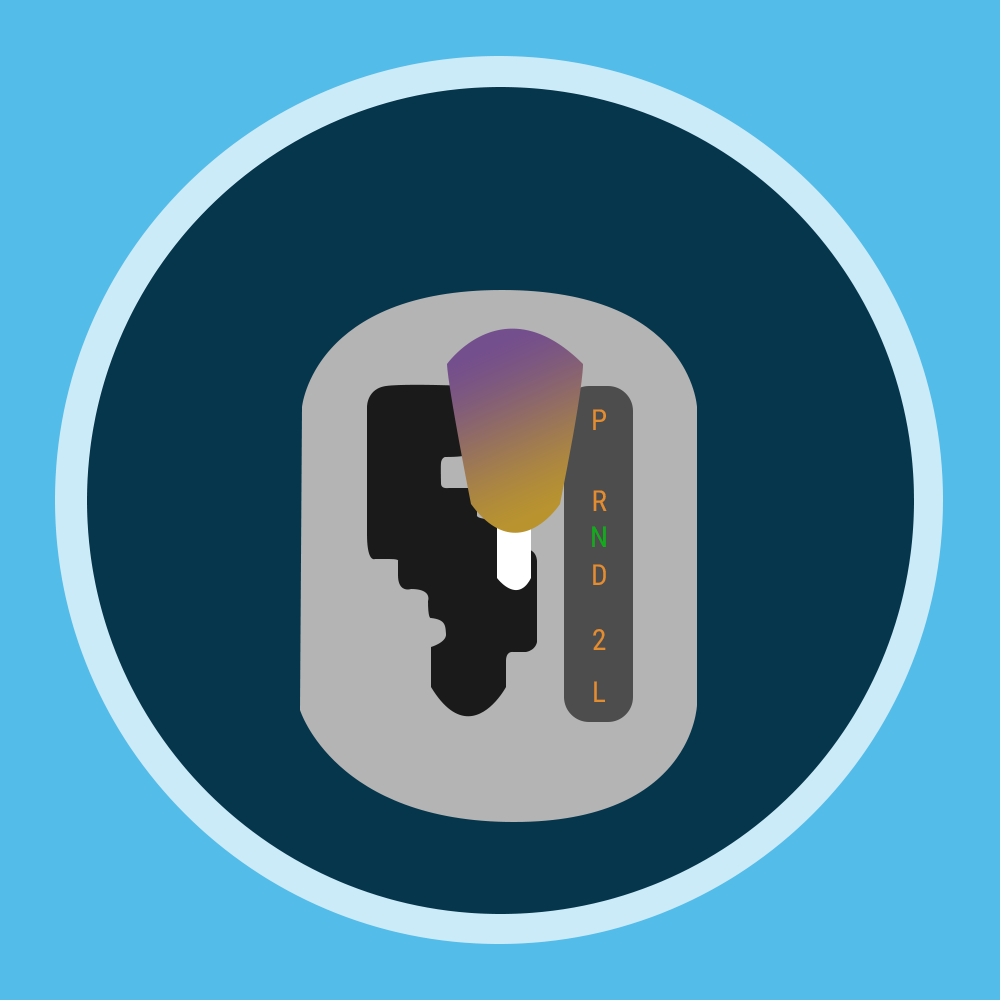
<style>
.page{position:relative;width:1000px;height:1000px;background:#53bce9}
.page>*{position:absolute;margin:0}
.t1{font:29px "RobotoCondensed-Regular";color:#e48d2f}
.t2{font:29px "RobotoCondensed-Regular";color:#0eae19}
</style>
<div class="page">
<p class="t1" style="left:593px;top:409px;width:13px;height:21px">P</p>
<p class="t1" style="left:593px;top:490px;width:14px;height:21px">R</p>
<p class="t2" style="left:592px;top:526px;width:14px;height:21px">N</p>
<p class="t1" style="left:593px;top:564px;width:13px;height:21px">D</p>
<p class="t1" style="left:593px;top:629px;width:13px;height:21px">2</p>
<p class="t1" style="left:594px;top:681px;width:11px;height:21px">L</p>
</div>
